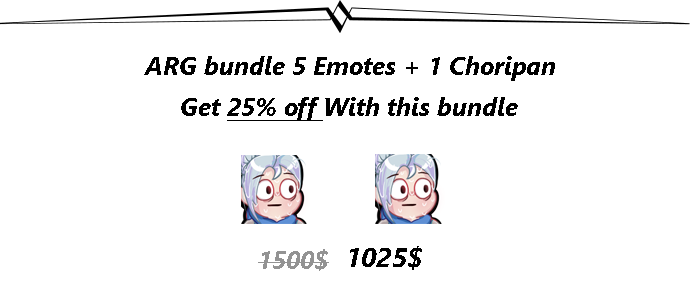
<style>
.page{position:relative;width:690px;height:300px;background:#ffffff}
.page>*{position:absolute;margin:0}
.t1{font:25px "SegoeUI-BoldItalic";color:#000000}
.t2{font:25px "SegoeUI-BoldItalic";color:#000000;text-decoration:underline}
.t3{font:27.2px "SegoeUI-BoldItalic";color:#000000}
.t4{font:25px "SegoeUI-BoldItalic";color:#939393}
</style>
<div class="page">
<p class="t1" style="left:144px;top:56px;width:411px;height:25px">ARG bundle 5 Emotes + 1 Choripan</p>
<p class="t1" style="left:181px;top:97px;width:337px;height:24px">Get <span class="t2">25% off </span>With this bundle</p>
<p class="t3" style="left:350px;top:246px;width:72px;height:24px">1025$</p>
<p class="t4" style="left:258px;top:249px;width:71px;height:22px">1500$</p>
</div>
